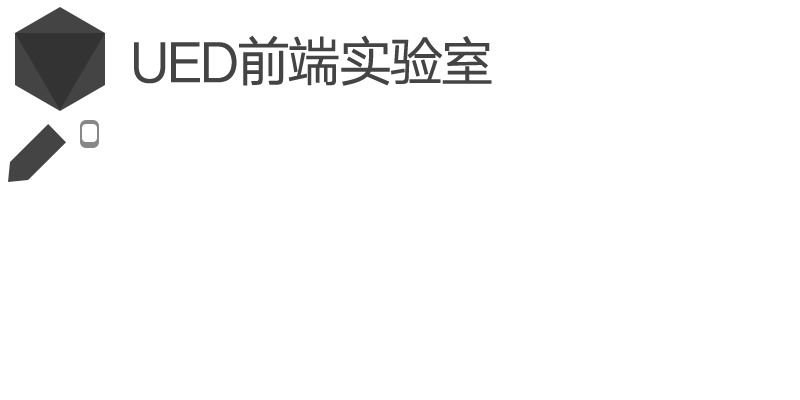
<style>
.page{position:relative;width:800px;height:400px;background:#ffffff}
.page>*{position:absolute;margin:0}
.t1{font:54px "HYQiHei-EZS";letter-spacing:-0.075em;color:#444444;font-weight:bold}
</style>
<div class="page">
<p class="t1" style="left:134px;top:35px;width:358px;height:51px">UED前端实验室</p>
</div>
